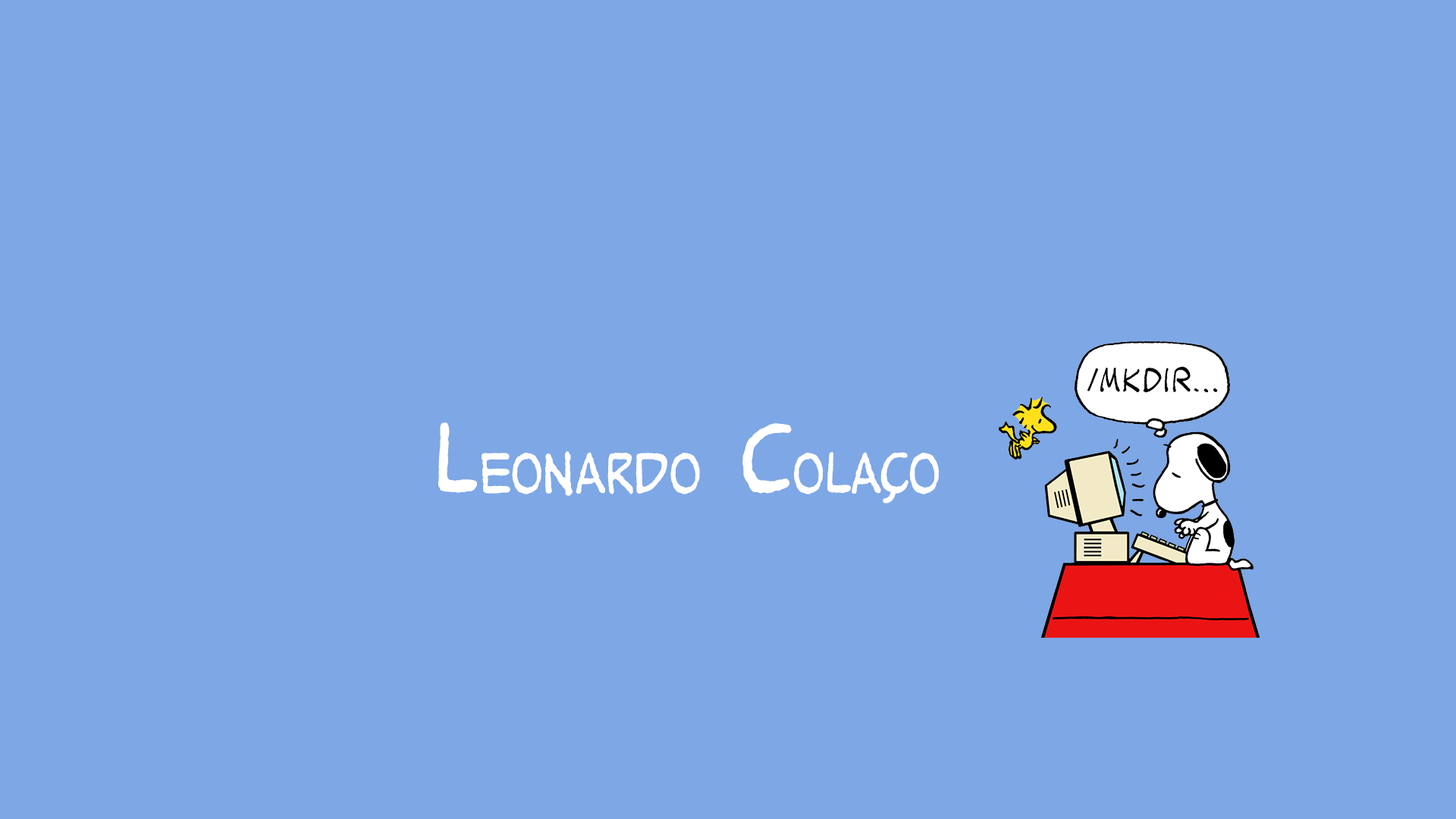
<style>
.page{position:relative;width:1456px;height:819px;background:#7ea7e5}
.page>*{position:absolute;margin:0}
.t1{font:51.5px "Peanuts";color:#ffffff}
.t2{font:88.3px "Peanuts";color:#ffffff}
</style>
<div class="page">
<p class="t1" style="left:438px;top:422px;width:501px;height:74px"><span class="t2">L</span>eonardo<span class="t2"> C</span>olaco</p>
</div>
